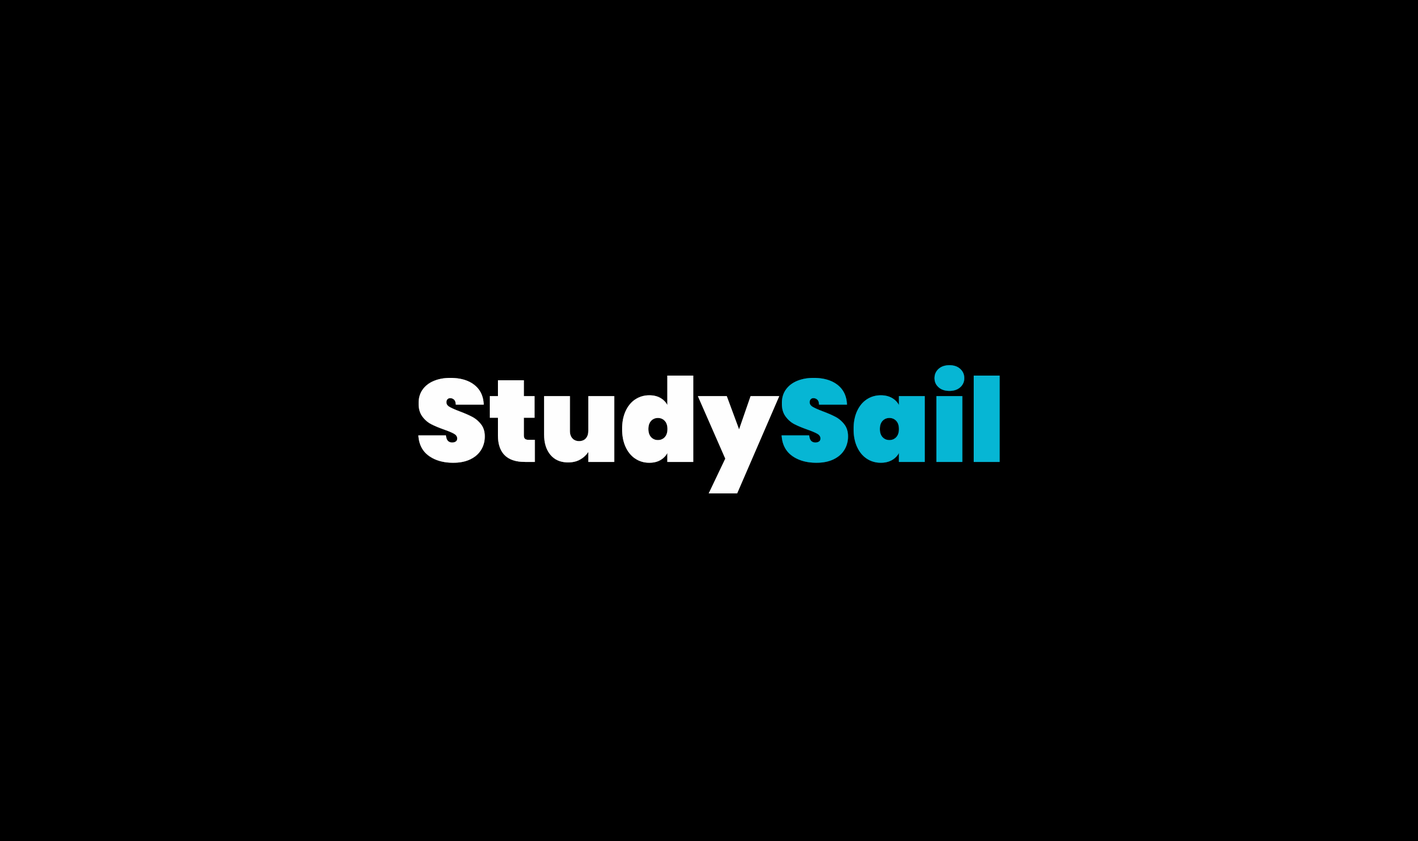
<style>
.page{position:relative;width:1418px;height:841px;background:#000000}
.page>*{position:absolute;margin:0}
.t1{font:116.6px "Poppins-Black";color:#fefefe}
.t2{font:116.6px "Poppins-Black";color:#06b6d4}
</style>
<div class="page">
<p class="t1" style="left:418px;top:365px;width:582px;height:128px">Study<span class="t2">Sail</span></p>
</div>
